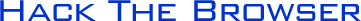
<style>
.page{position:relative;width:361px;height:21px;background:#ffffff}
.page>*{position:absolute;margin:0}
.t1{font:40px "BankGothic-Light";letter-spacing:-0.05em;color:#0033cc}
</style>
<div class="page">
<p class="t1" style="left:0px;top:0px;width:361px;height:21px">Hack The Browser</p>
</div>
